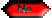
<style>
.page{position:relative;width:52px;height:18px;background:#ffffff}
.page>*{position:absolute;margin:0}
.t1{font:10px "LucidaSansUnicode";font-weight:bold}
</style>
<div class="page">
<p class="t1" style="left:18px;top:5px;width:14px;height:7px">No</p>
</div>
